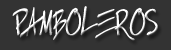
<style>
.page{position:relative;width:171px;height:50px;background:#333333}
.page>*{position:absolute;margin:0}
.t1{font:49.1px "EspecialKay";scale:0.64 1}
</style>
<div class="page">
<p class="t1" style="left:12px;top:6px;width:146px;height:35px">PAMBOLEROS</p>
</div>
